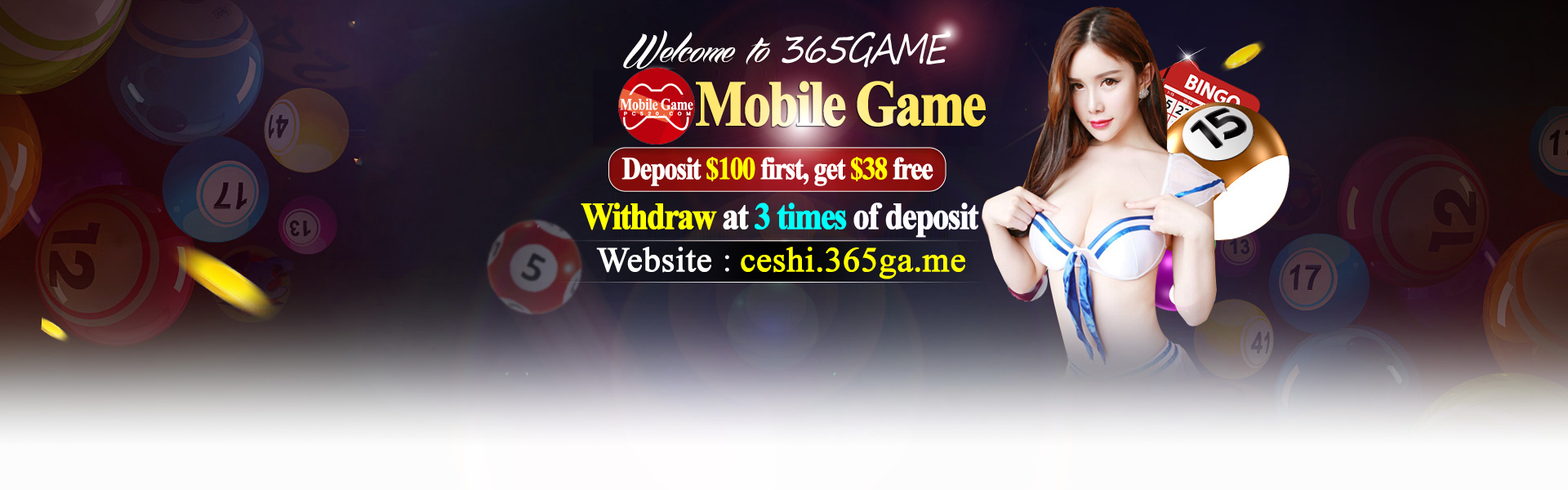
<style>
.page{position:relative;width:1568px;height:490px}
.page>*{position:absolute;margin:0}
.t1{font:41.2px "SegoePrint";letter-spacing:-0.08em;color:#fffffd;font-style:italic;scale:0.83 1}
.t2{font:31.4px "TimesNewRomanPS-BoldMT";letter-spacing:-0.06em;color:#fffffd;font-weight:bold;scale:0.83 1}
.t3{font:31.4px "TimesNewRomanPS-BoldMT";letter-spacing:-0.06em;color:#feff03;font-weight:bold;scale:0.83 1}
.t4{font:31.4px "TimesNewRomanPS-BoldMT";letter-spacing:-0.06em;color:#fefd03;font-weight:bold;scale:0.83 1}
.t5{font:37.6px "TimesNewRomanPS-BoldMT";letter-spacing:-0.06em;color:#fcfdff;font-weight:bold;scale:0.87 1}
.t6{font:37.6px "TimesNewRomanPS-BoldMT";letter-spacing:-0.06em;color:#fdff03;font-weight:bold;scale:0.87 1}
.t7{font:37.6px "TimesNewRomanPS-BoldMT";letter-spacing:-0.06em;color:#fdfffc;font-weight:bold;scale:0.87 1}
.t8{font:37.6px "TimesNewRomanPS-BoldMT";letter-spacing:-0.06em;color:#00fff9;font-weight:bold;scale:0.87 1}
.t9{font:34.3px "TimesNewRomanPSMT";color:#fefe00;font-weight:bold}
.t10{font:34.3px "TimesNewRomanPSMT";color:#fffffd;font-weight:bold}
.t11{font:34.3px "TimesNewRomanPSMT";color:#fffffd}
</style>
<div class="page">
<p class="t1" style="left:782px;top:32px;width:169px;height:36px">365GAME</p>
<p class="t2" style="left:621px;top:157px;width:312px;height:29px">Deposit <span class="t3">$100</span> first, get <span class="t4">$38</span> free</p>
<p class="t5" style="left:581px;top:203px;width:398px;height:35px"><span class="t6">Withdraw </span><span class="t7">at </span><span class="t8">3 times </span>of deposit</p>
<p class="t9" style="left:596px;top:247px;width:369px;height:32px"><span class="t10">Website </span><span class="t11">: </span>ceshi.365ga.me</p>
</div>
